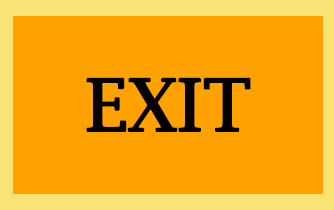
<style>
.page{position:relative;width:334px;height:210px;background:#ffa200}
.page>*{position:absolute;margin:0}
.t1{font:72px "LucidaBright";color:#000000;font-weight:bold}
</style>
<div class="page">
<p class="t1" style="left:86px;top:77px;width:165px;height:55px">EXIT</p>
</div>
